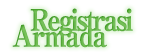
<style>
.page{position:relative;width:147px;height:55px;background:#ffffff}
.page>*{position:absolute;margin:0}
.t1{font:29px/16px "RyuminPro-ExBold";letter-spacing:-0.12em;color:#68b74b;font-weight:bold;scale:0.9 1}
.t2{font:29px/16px "RyuminPro-ExBold";letter-spacing:-0.08em;color:#68b74b;font-weight:bold;scale:0.9 1}
</style>
<div class="page">
<p class="t1" style="left:12px;top:8px;width:121px;height:40px;text-align:center">Registrasi<br><span class="t2">Armada</span></p>
</div>
